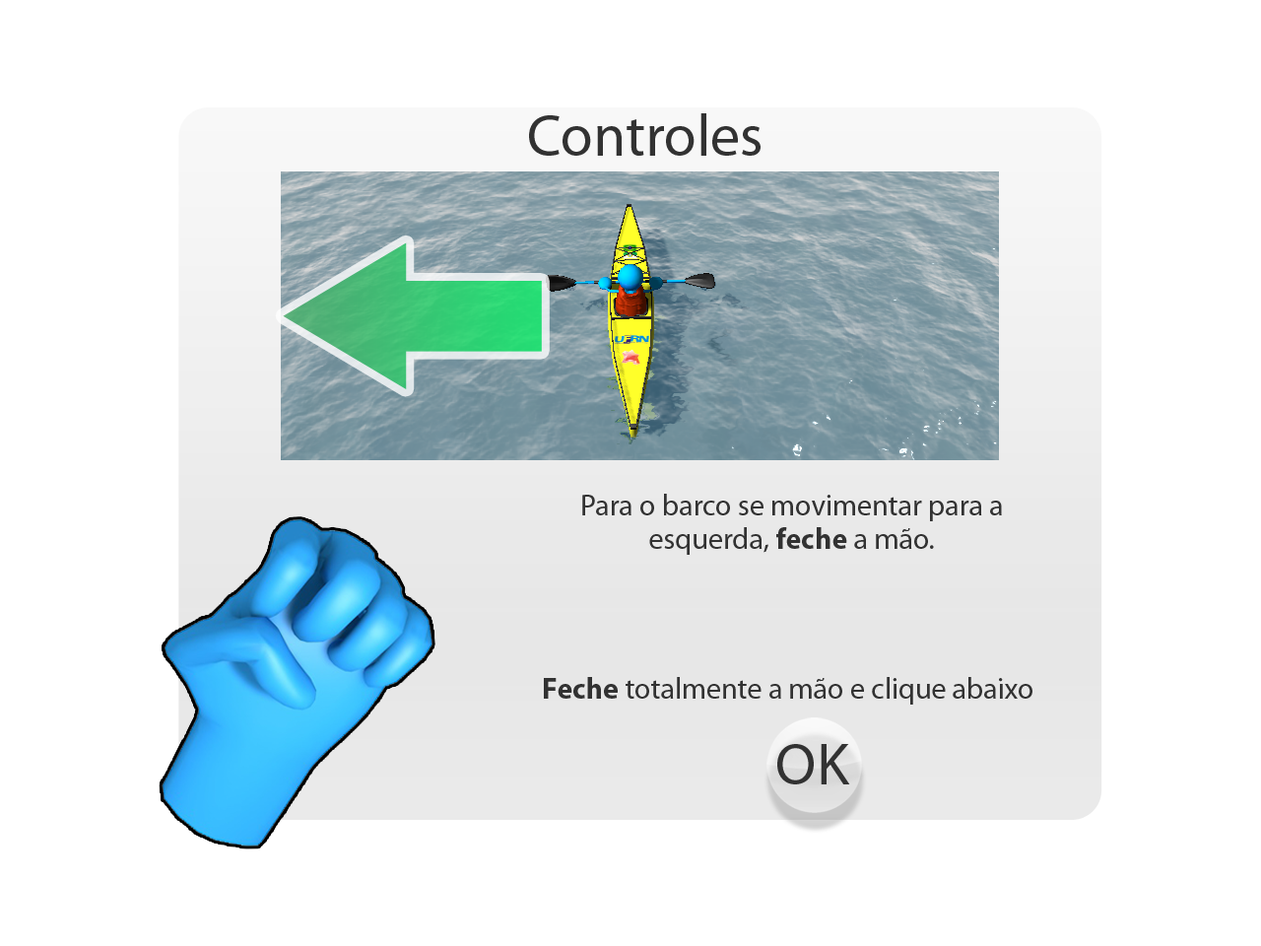
<style>
.page{position:relative;width:1261px;height:946px;background:#ffffff}
.page>*{position:absolute;margin:0}
.t1{font:59.1px "MyriadPro-Regular";color:#323232}
.t2{font:29.6px/16.7px "MyriadPro-Regular";color:#323232}
.t3{font:29.6px/16.7px "MyriadPro-Bold";color:#323232}
.t4{font:29.6px "MyriadPro-Regular";color:#323232}
.t5{font:29.6px "MyriadPro-Bold";color:#323232}
</style>
<div class="page">
<p class="t1" style="left:529px;top:113px;width:231px;height:43px">Controles</p>
<p class="t2" style="left:582px;top:494px;width:420px;height:61px;text-align:center">Para o barco se movimentar para a<br><br>esquerda, <span class="t3">feche</span> a mão.</p>
<p class="t4" style="left:544px;top:677px;width:488px;height:27px"><span class="t5">Feche</span> totalmente a mão e clique abaixo</p>
</div>
